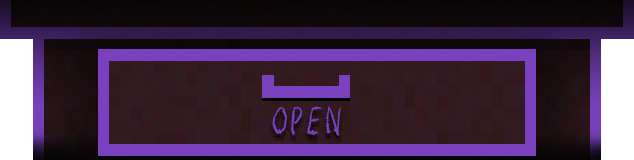
<style>
.page{position:relative;width:634px;height:160px}
.page>*{position:absolute;margin:0}
.t1{font:35.2px "RazorKeen-Regular";letter-spacing:0.06em;color:#7941bd;scale:1.15 1}
</style>
<div class="page">
<p class="t1" style="left:272px;top:106px;width:69px;height:30px">OPEN</p>
</div>
